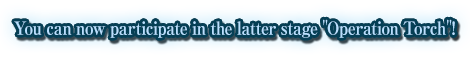
<style>
.page{position:relative;width:470px;height:58px}
.page>*{position:absolute;margin:0}
.t1{font:18px "RyuminPro-ExBold";letter-spacing:-0.04em;color:#b9e0ff;scale:0.9 1}
</style>
<div class="page">
<p class="t1" style="left:14px;top:19px;width:441px;height:19px">You can now participate in the latter stage "Operation Torch"!</p>
</div>
